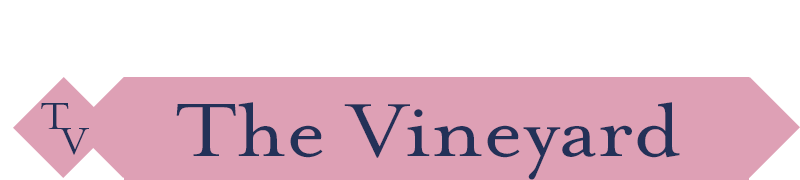
<style>
.page{position:relative;width:800px;height:180px;background:#ffffff}
.page>*{position:absolute;margin:0}
.t1{font:86.9px "MrsEavesOT-Roman";color:#233158;scale:1.09 1}
.t2{font:43.4px "MrsEavesOT-Roman";color:#233158}
</style>
<div class="page">
<p class="t1" style="left:176px;top:102px;width:504px;height:78px">The Vineyard</p>
<p class="t2" style="left:41px;top:103px;width:28px;height:26px">T</p>
<p class="t2" style="left:59px;top:128px;width:30px;height:27px">V</p>
</div>
